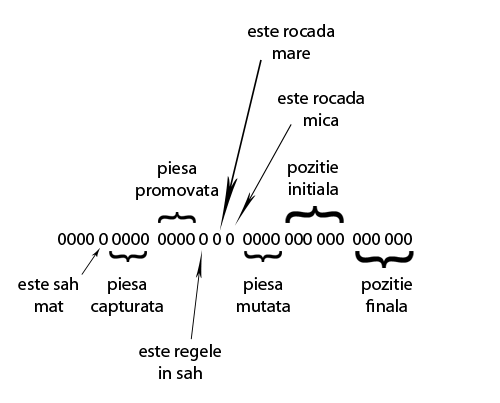
<style>
.page{position:relative;width:500px;height:403px;background:#ffffff}
.page>*{position:absolute;margin:0}
.t1{font:18.3px "MyriadPro-Regular";color:#000000}
</style>
<div class="page">
<p class="t1" style="left:248px;top:24px;width:87px;height:35px;text-align:center">este rocada<br>mare</p>
<p class="t1" style="left:278px;top:91px;width:86px;height:35px;text-align:center">este rocada<br>mica</p>
<p class="t1" style="left:136px;top:161px;width:83px;height:39px;text-align:center">piesa<br>promovata</p>
<p class="t1" style="left:288px;top:160px;width:50px;height:35px;text-align:center">pozitie<br>initiala</p>
<p class="t1" style="left:58px;top:233px;width:354px;height:12px">0000 0 0000  0000 0 0 0  0000 000 000  000 000</p>
<p class="t1" style="left:18px;top:277px;width:60px;height:35px;text-align:center">este sah<br>mat</p>
<p class="t1" style="left:91px;top:277px;width:72px;height:39px;text-align:center">piesa<br>capturata</p>
<p class="t1" style="left:237px;top:277px;width:53px;height:35px;text-align:center">piesa<br>mutata</p>
<p class="t1" style="left:362px;top:277px;width:50px;height:35px;text-align:center">pozitie<br>finala</p>
<p class="t1" style="left:139px;top:344px;width:82px;height:35px;text-align:center">este regele<br>in sah</p>
</div>
